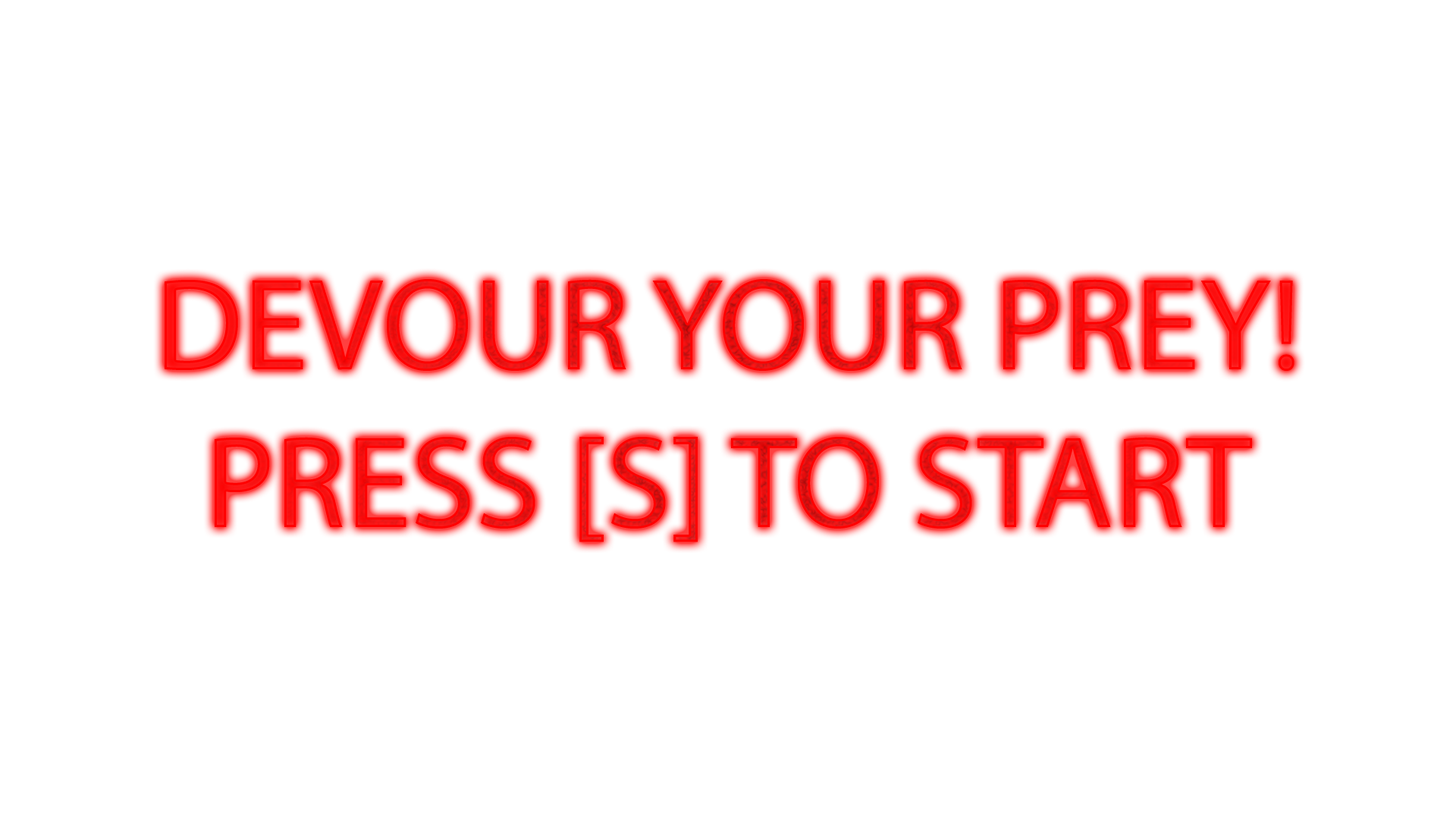
<style>
.page{position:relative;width:1456px;height:819px;background:#ffffff}
.page>*{position:absolute;margin:0}
.t1{font:132px "MyriadPro-Regular";color:#fe0000}
</style>
<div class="page">
<p class="t1" style="left:165px;top:279px;width:1129px;height:263px;text-align:center">DEVOUR YOUR PREY!<br>PRESS [S] TO START</p>
</div>
